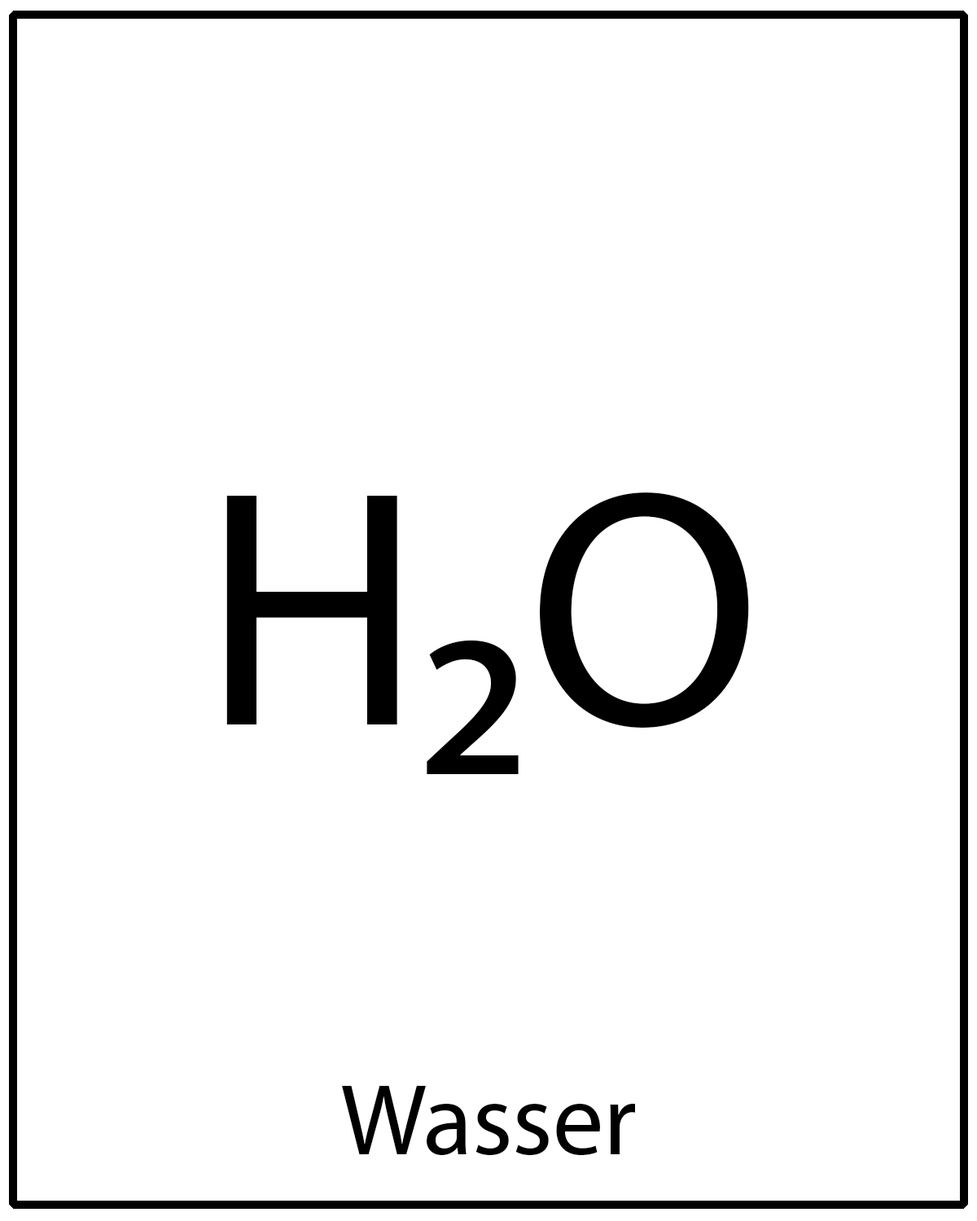
<style>
.page{position:relative;width:977px;height:1221px;background:#ffffff}
.page>*{position:absolute;margin:0}
.t1{font:339.1px "MyriadPro-Regular";color:#000000}
.t2{font:101.7px "MyriadPro-Regular";color:#000000}
</style>
<div class="page">
<p class="t1" style="left:226px;top:492px;width:523px;height:282px">H2O</p>
<p class="t2" style="left:342px;top:1085px;width:293px;height:71px">Wasser</p>
</div>
